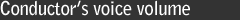
<style>
.page{position:relative;width:240px;height:20px;background:#333333}
.page>*{position:absolute;margin:0}
.t1{font:19px "BellGothicStd-Bold";letter-spacing:-0.025em;color:#ffffff}
</style>
<div class="page">
<p class="t1" style="left:0px;top:0px;width:190px;height:16px">Conductor’s voice volume</p>
</div>
